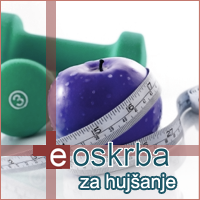
<style>
.page{position:relative;width:200px;height:200px}
.page>*{position:absolute;margin:0}
.t1{font:19px "ArialMT";color:#ffffff}
</style>
<div class="page">
<p class="t1" style="left:80px;top:174px;width:96px;height:18px">za hujšanje</p>
</div>
